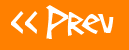
<style>
.page{position:relative;width:129px;height:50px;background:#ff8000}
.page>*{position:absolute;margin:0}
.t1{font:48px "Screwball";color:#ffffff}
</style>
<div class="page">
<p class="t1" style="left:11px;top:5px;width:103px;height:34px">&lt;&lt; Prev</p>
</div>
